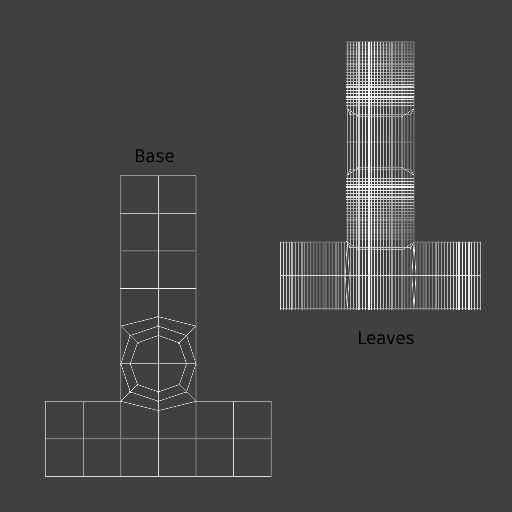
<style>
.page{position:relative;width:512px;height:512px;background:#404040}
.page>*{position:absolute;margin:0}
.t1{font:18px "ArtifaktElement-Regular";color:#000000}
</style>
<div class="page">
<p class="t1" style="left:136px;top:149px;width:38px;height:14px">Base</p>
<p class="t1" style="left:359px;top:331px;width:55px;height:14px">Leaves</p>
</div>
